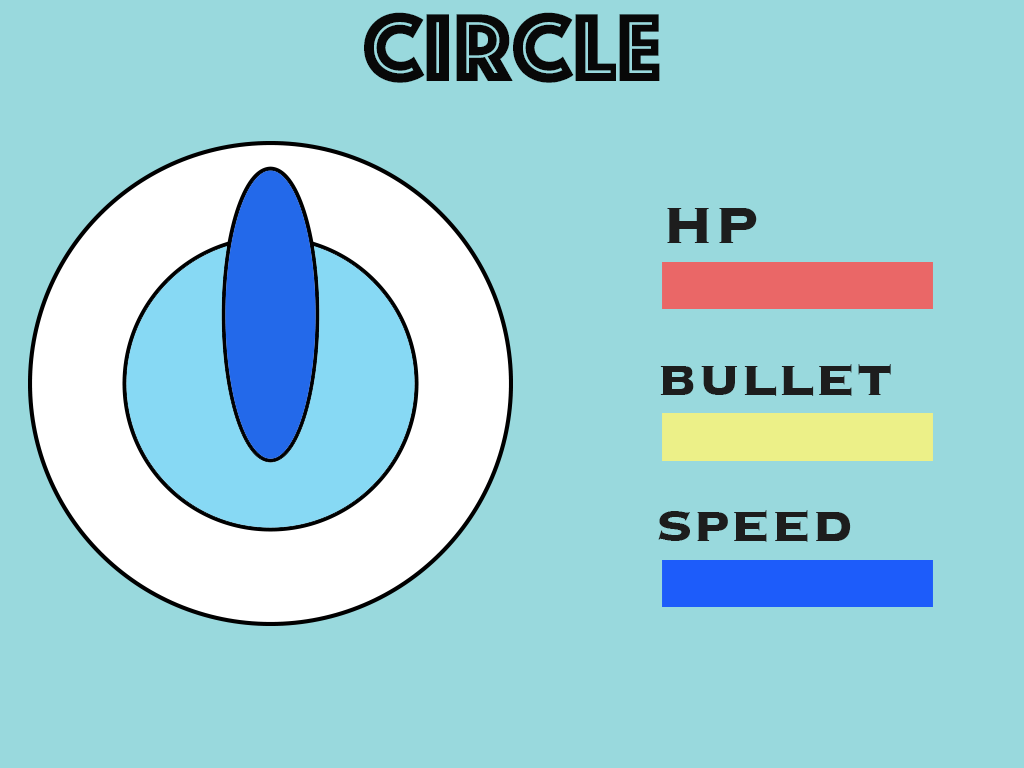
<style>
.page{position:relative;width:1024px;height:768px;background:#99d9dd}
.page>*{position:absolute;margin:0}
.t1{font:100px "Phosphate-Inline";color:#080808}
.t2{font:66.7px "Copperplate-Bold";color:#1d1d1d}
</style>
<div class="page">
<p class="t1" style="left:364px;top:12px;width:296px;height:71px">Circle</p>
<p class="t2" style="left:667px;top:208px;width:90px;height:35px">HP</p>
<p class="t2" style="left:667px;top:210px;width:90px;height:35px">HP</p>
<p class="t2" style="left:667px;top:210px;width:90px;height:35px">HP</p>
<p class="t2" style="left:660px;top:364px;width:231px;height:32px">bullet</p>
<p class="t2" style="left:660px;top:367px;width:231px;height:32px">bullet</p>
<p class="t2" style="left:660px;top:367px;width:231px;height:32px">bullet</p>
<p class="t2" style="left:658px;top:510px;width:193px;height:32px">speed</p>
<p class="t2" style="left:658px;top:513px;width:193px;height:32px">speed</p>
<p class="t2" style="left:658px;top:513px;width:193px;height:32px">speed</p>
</div>
